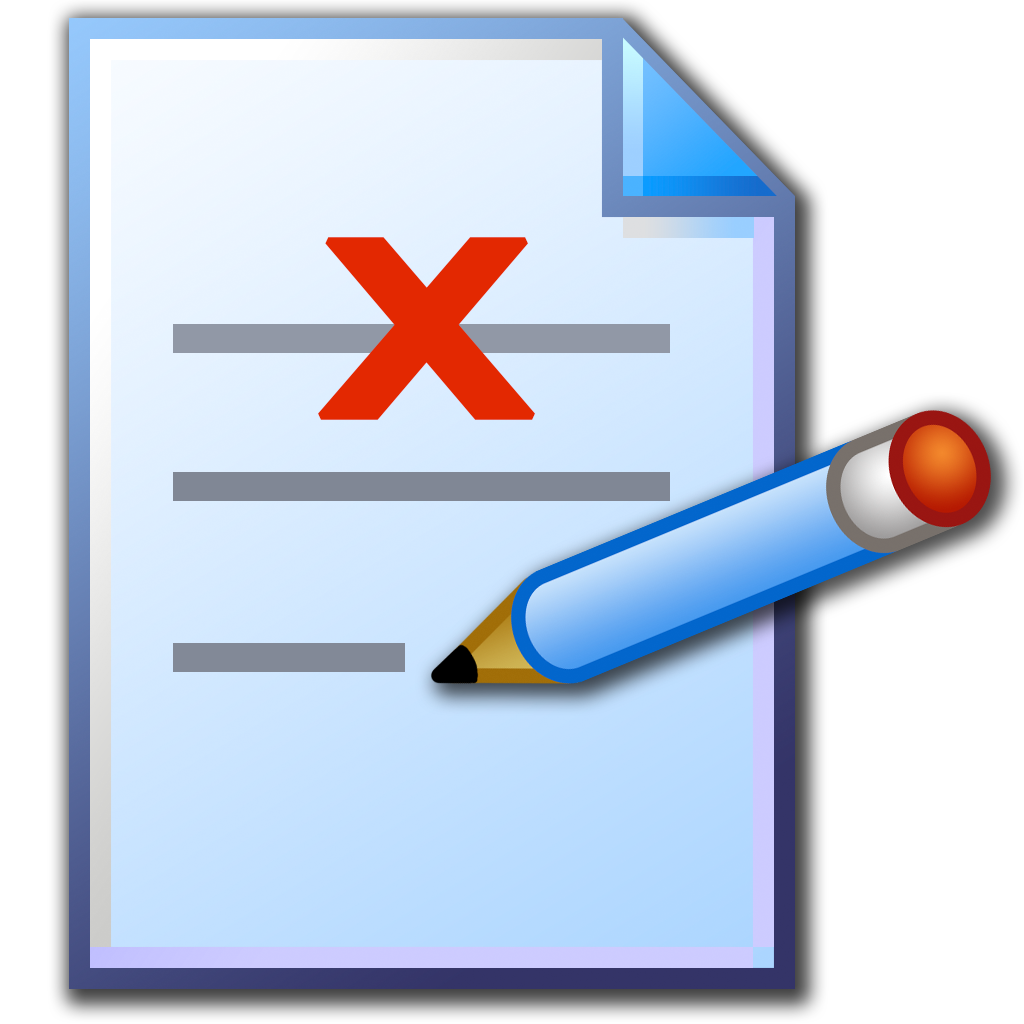
<style>
.page{position:relative;width:1024px;height:1024px;background:#ffffff}
.page>*{position:absolute;margin:0}
.t1{font:243.8px "Arial-BoldMT";letter-spacing:-0.025em;color:#e32801;font-weight:bold;scale:1.3 1}
</style>
<div class="page">
<p class="t1" style="left:318px;top:237px;width:217px;height:183px">X</p>
</div>
